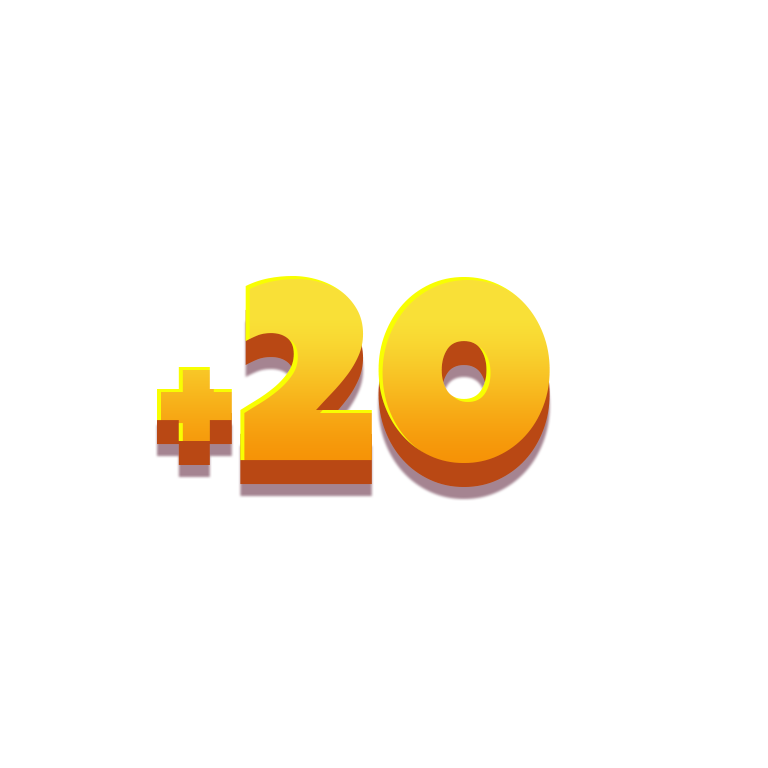
<style>
.page{position:relative;width:768px;height:768px;background:#ffffff}
.page>*{position:absolute;margin:0}
.t1{font:265.9px "Tondu-Beta"}
.t2{font:179.9px "Tondu-Beta"}
</style>
<div class="page">
<p class="t1" style="left:157px;top:276px;width:393px;height:187px"><span class="t2">+</span>20</p>
<p class="t1" style="left:157px;top:300px;width:393px;height:187px"><span class="t2">+</span>20</p>
</div>
